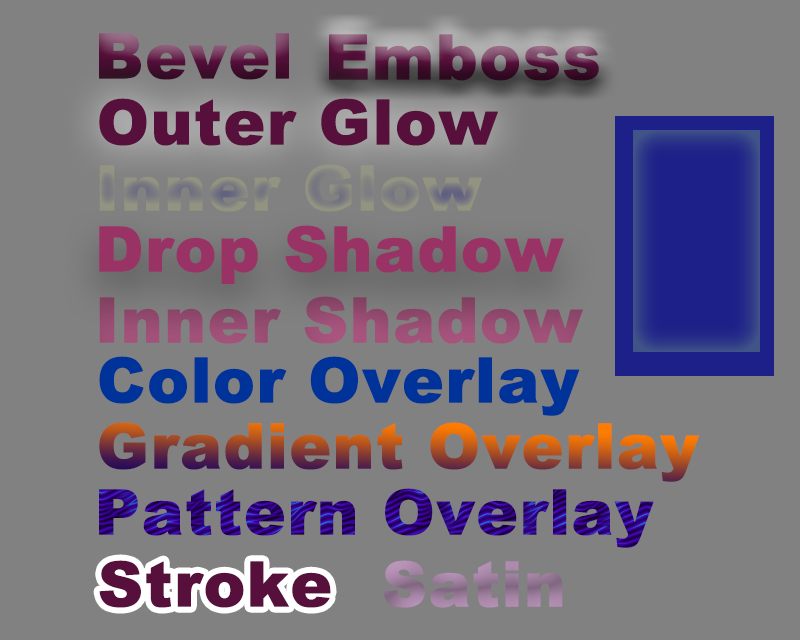
<style>
.page{position:relative;width:800px;height:640px;background:#818181}
.page>*{position:absolute;margin:0}
.t1{font:62.5px "Arial-Black";font-weight:bold}
.t2{font:62.5px "Arial-Black";color:#57103b;font-weight:bold}
.t3{font:62.5px "Arial-Black";color:#993366;font-weight:bold}
.t4{font:62.5px "Arial-Black";color:#994c73;font-weight:bold}
.t5{font:62.5px "Arial-Black";color:#003399;font-weight:bold}
.t6{font:62.5px "Arial-Black";color:#9f7f9f;font-weight:bold}
</style>
<div class="page">
<p class="t1" style="left:99px;top:33px;width:190px;height:47px">Bevel</p>
<p class="t1" style="left:329px;top:34px;width:270px;height:47px">Emboss</p>
<p class="t2" style="left:99px;top:98px;width:399px;height:48px">Outer Glow</p>
<p class="t3" style="left:99px;top:225px;width:465px;height:59px">Drop Shadow</p>
<p class="t4" style="left:99px;top:296px;width:484px;height:48px">Inner Shadow</p>
<p class="t5" style="left:99px;top:356px;width:481px;height:60px">Color Overlay</p>
<p class="t1" style="left:99px;top:422px;width:600px;height:60px">Gradient Overlay</p>
<p class="t1" style="left:99px;top:488px;width:555px;height:60px">Pattern Overlay</p>
<p class="t2" style="left:99px;top:560px;width:232px;height:48px">Stroke</p>
<p class="t6" style="left:383px;top:560px;width:180px;height:48px">Satin</p>
</div>
